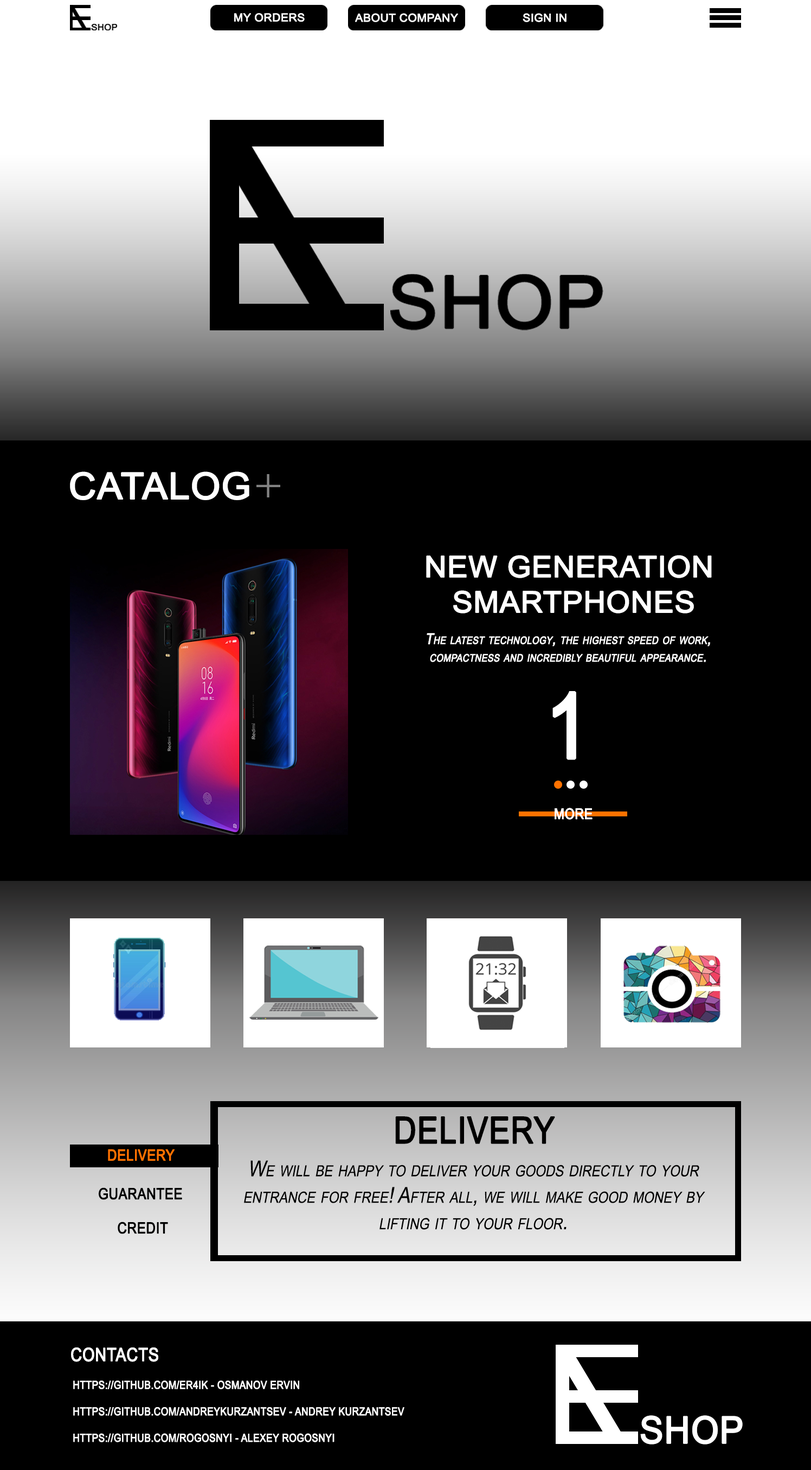
<style>
.page{position:relative;width:811px;height:1470px;background:#000000}
.page>*{position:absolute;margin:0}
.t1{font:11px "ArialMT";color:#ffffff;text-transform:uppercase;font-weight:bold;scale:1.04 1}
.t2{font:36.7px "ArialMT";color:#ffffff;text-transform:uppercase;font-weight:bold;scale:1.04 1}
.t3{font:29.4px "ArialMT";color:#ffffff;text-transform:uppercase;font-weight:bold;scale:1.04 1}
.t4{font:14.7px "ArialNarrow";color:#ffffff;font-variant:small-caps;font-weight:bold;font-style:italic;scale:1.04 1}
.t5{font:91.9px "ArialNarrow";color:#ffffff;text-transform:uppercase;font-weight:bold;scale:1.04 1}
.t6{font:14.7px "ArialNarrow";color:#ffffff;text-transform:uppercase;font-weight:bold;scale:1.04 1}
.t7{font:36.7px "ArialNarrow";color:#000000;text-transform:uppercase;font-weight:bold;scale:1.04 1}
.t8{font:15.3px "ArialNarrow";color:#ff7200;text-transform:uppercase;font-weight:bold;scale:1.04 1}
.t9{font:22px "ArialNarrow";color:#000000;font-variant:small-caps;font-style:italic;scale:1.04 1}
.t10{font:15.3px "ArialNarrow";color:#000000;text-transform:uppercase;font-weight:bold;scale:1.04 1}
.t11{font:18.4px "ArialNarrow";color:#ffffff;text-transform:uppercase;font-weight:bold;scale:1.04 1}
.t12{font:11px "ArialNarrow";color:#ffffff;text-transform:uppercase;font-weight:bold;scale:1.04 1}
.t13{font:37.3px "ArialNarrow";color:#ffffff;text-transform:uppercase;font-weight:bold;scale:1.16 1}
</style>
<div class="page">
<p class="t1" style="left:234px;top:13px;width:71px;height:9px">My orders</p>
<p class="t1" style="left:355px;top:13px;width:103px;height:9px">About company</p>
<p class="t1" style="left:523px;top:13px;width:44px;height:9px">Sign In</p>
<p class="t2" style="left:70px;top:471px;width:179px;height:29px">catalog</p>
<p class="t3" style="left:426px;top:555px;width:286px;height:58px;text-align:center">new generation <br>smartphones</p>
<p class="t4" style="left:427px;top:633px;width:283px;height:29px;text-align:center">The latest technology, the highest speed of work, <br>compactness and incredibly beautiful appearance.</p>
<p class="t5" style="left:553px;top:691px;width:24px;height:69px">1</p>
<p class="t6" style="left:555px;top:808px;width:38px;height:11px">more</p>
<p class="t7" style="left:395px;top:1116px;width:160px;height:28px">Delivery</p>
<p class="t8" style="left:108px;top:1149px;width:67px;height:12px">delivery</p>
<p class="t9" style="left:244px;top:1160px;width:462px;height:69px;text-align:center">We will be happy to deliver your goods directly to your entrance for free! After all, we will make good money by lifting it to your floor.</p>
<p class="t10" style="left:99px;top:1187px;width:83px;height:13px">guarantee</p>
<p class="t10" style="left:118px;top:1221px;width:50px;height:13px">credit</p>
<p class="t11" style="left:71px;top:1347px;width:87px;height:15px">contacts</p>
<p class="t12" style="left:73px;top:1380px;width:332px;height:62px">https://github.com/Er4ik - Osmanov Ervin<br><br>https://github.com/andreykurzantsev - Andrey Kurzantsev<br><br>https://github.com/rogosnyi - Alexey Rogosnyi</p>
<p class="t13" style="left:640px;top:1415px;width:103px;height:29px">Shop</p>
</div>
